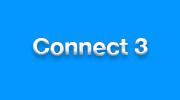
<style>
.page{position:relative;width:180px;height:100px;background:#0397ff}
.page>*{position:absolute;margin:0}
.t1{font:24px "HelveticaNeue-Bold";color:#ffffff}
</style>
<div class="page">
<p class="t1" style="left:33px;top:38px;width:115px;height:18px">Connect 3</p>
</div>
